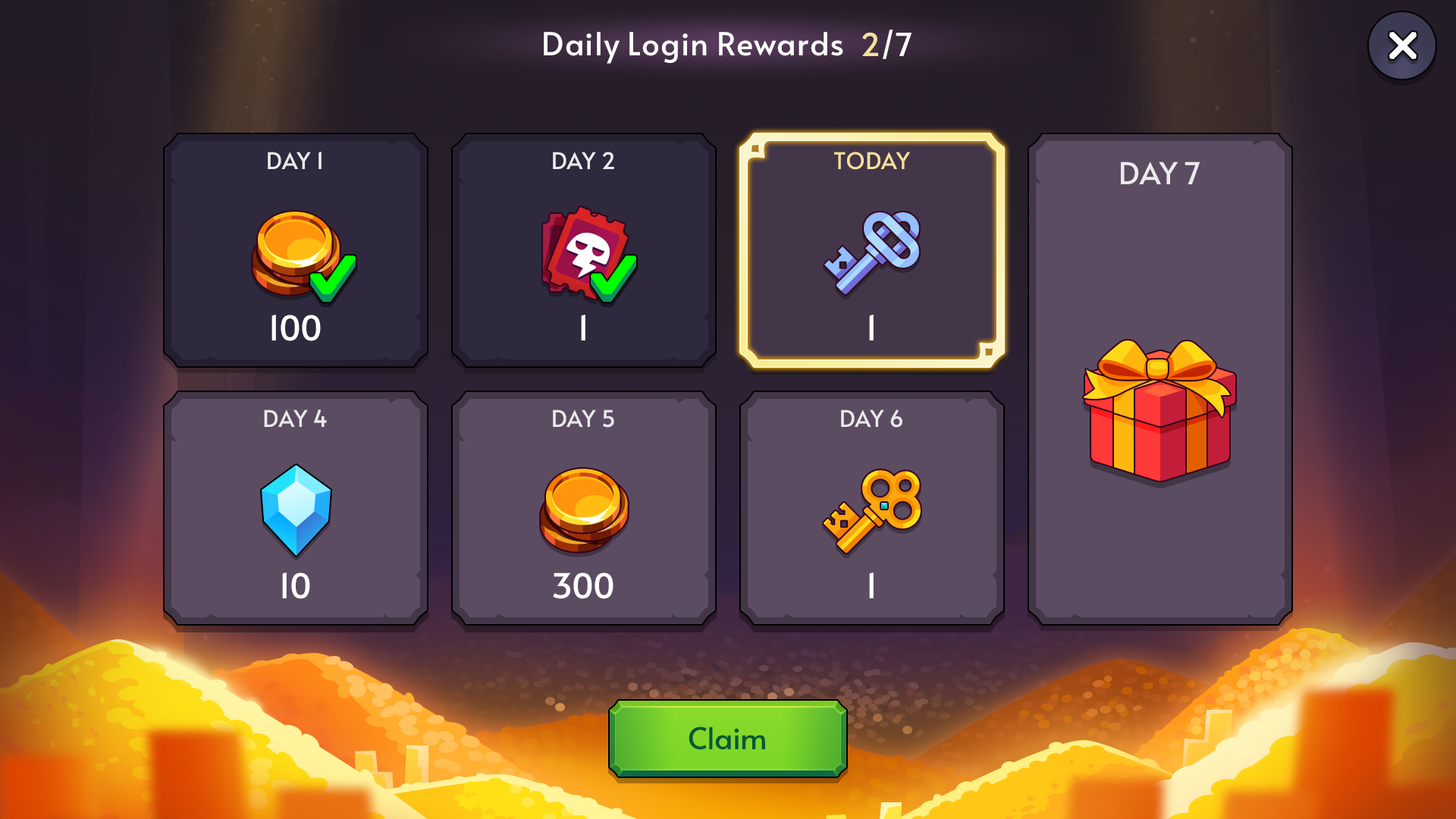
<style>
.page{position:relative;width:1456px;height:819px}
.page>*{position:absolute;margin:0}
.t1{font:31.8px "Alata-Regular";color:#ffffff}
.t2{font:31.8px "Alata-Regular";color:#f6e19c}
.t3{font:22.7px "Alata-Regular";color:#eceaed;text-transform:uppercase}
.t4{font:22.7px "Alata-Regular";color:#f6e19c;text-transform:uppercase}
.t5{font:30.3px "Alata-Regular";color:#eceaed;text-transform:uppercase}
.t6{font:34.1px "Alata-Regular";color:#ffffff}
.t7{font:30.3px "Alata-Regular";color:#045a39}
</style>
<div class="page">
<p class="t1" style="left:544px;top:30px;width:368px;height:34px">Daily Login Rewards  <span class="t2">2</span>/7</p>
<p class="t3" style="left:268px;top:152px;width:54px;height:17px">Day 1</p>
<p class="t3" style="left:553px;top:152px;width:61px;height:17px">Day 2</p>
<p class="t4" style="left:834px;top:152px;width:77px;height:18px">Today</p>
<p class="t5" style="left:1121px;top:162px;width:79px;height:22px">Day 7</p>
<p class="t6" style="left:271px;top:315px;width:50px;height:26px">100</p>
<p class="t6" style="left:581px;top:315px;width:4px;height:25px">1</p>
<p class="t6" style="left:869px;top:315px;width:5px;height:25px">1</p>
<p class="t3" style="left:264px;top:409px;width:63px;height:18px">Day 4</p>
<p class="t3" style="left:553px;top:409px;width:61px;height:19px">Day 5</p>
<p class="t3" style="left:841px;top:409px;width:61px;height:19px">Day 6</p>
<p class="t6" style="left:282px;top:573px;width:28px;height:26px">10</p>
<p class="t6" style="left:553px;top:573px;width:60px;height:26px">300</p>
<p class="t6" style="left:869px;top:573px;width:5px;height:25px">1</p>
<p class="t7" style="left:689px;top:726px;width:76px;height:24px">Claim</p>
</div>
